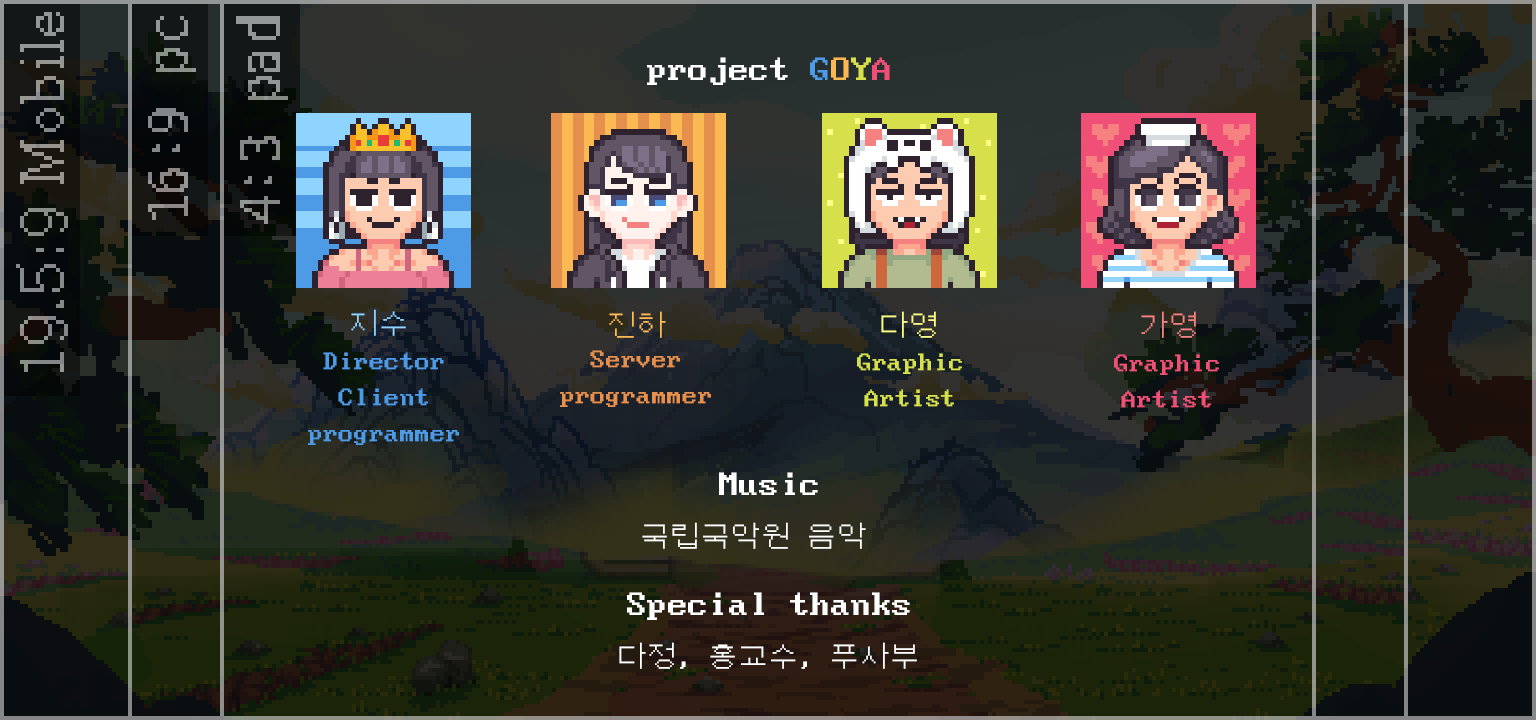
<style>
.page{position:relative;width:1536px;height:720px}
.page>*{position:absolute;margin:0}
.t1{font:40px "DOSGothic";letter-spacing:0.01em;color:#ffffff}
.t2{font:40px "DOSGothic";letter-spacing:0.01em;color:#4d9be6}
.t3{font:40px "DOSGothic";letter-spacing:0.01em;color:#fbb954}
.t4{font:40px "DOSGothic";letter-spacing:0.01em;color:#d5e04b}
.t5{font:40px "DOSGothic";letter-spacing:0.01em;color:#f04f78}
.t6{font:30px "DOSGothic";letter-spacing:0.01em;color:#8fd3ff}
.t7{font:30px "DOSGothic";letter-spacing:0.01em;color:#fbb954}
.t8{font:30px "DOSGothic";letter-spacing:0.01em;color:#fbff86}
.t9{font:30px "DOSGothic";letter-spacing:0.01em;color:#f68181}
.t10{font:30px "DOSGothic";letter-spacing:0.01em;color:#4d9be6}
.t11{font:30px "DOSGothic";letter-spacing:0.01em;color:#e6904e}
.t12{font:30px "DOSGothic";letter-spacing:0.01em;color:#d5e04b}
.t13{font:30px "DOSGothic";letter-spacing:0.01em;color:#f04f78}
.t14{font:30px "DOSGothic";letter-spacing:0.01em;color:#ffffff}
</style>
<div class="page">
<p class="t1" style="left:647px;top:57px;width:243px;height:28px">project <span class="t2">G</span><span class="t3">O</span><span class="t4">Y</span><span class="t5">A</span></p>
<p class="t6" style="left:351px;top:309px;width:55px;height:27px">지수</p>
<p class="t7" style="left:609px;top:311px;width:57px;height:27px">진하</p>
<p class="t8" style="left:881px;top:311px;width:55px;height:27px">다영</p>
<p class="t9" style="left:1141px;top:311px;width:55px;height:27px">가영</p>
<p class="t10" style="left:308px;top:352px;width:151px;height:93px;text-align:center">Director<br>Client<br>programmer</p>
<p class="t11" style="left:560px;top:350px;width:151px;height:57px;text-align:center">Server<br>programmer</p>
<p class="t12" style="left:857px;top:353px;width:105px;height:54px;text-align:center">Graphic<br>Artist</p>
<p class="t13" style="left:1114px;top:354px;width:105px;height:54px;text-align:center">Graphic<br>Artist</p>
<p class="t1" style="left:719px;top:472px;width:99px;height:23px">Music</p>
<p class="t14" style="left:642px;top:522px;width:224px;height:27px">국립국악원 음악</p>
<p class="t1" style="left:627px;top:592px;width:283px;height:28px">Special thanks</p>
<p class="t14" style="left:619px;top:642px;width:298px;height:27px">다정, 홍교수, 푸사부</p>
</div>
